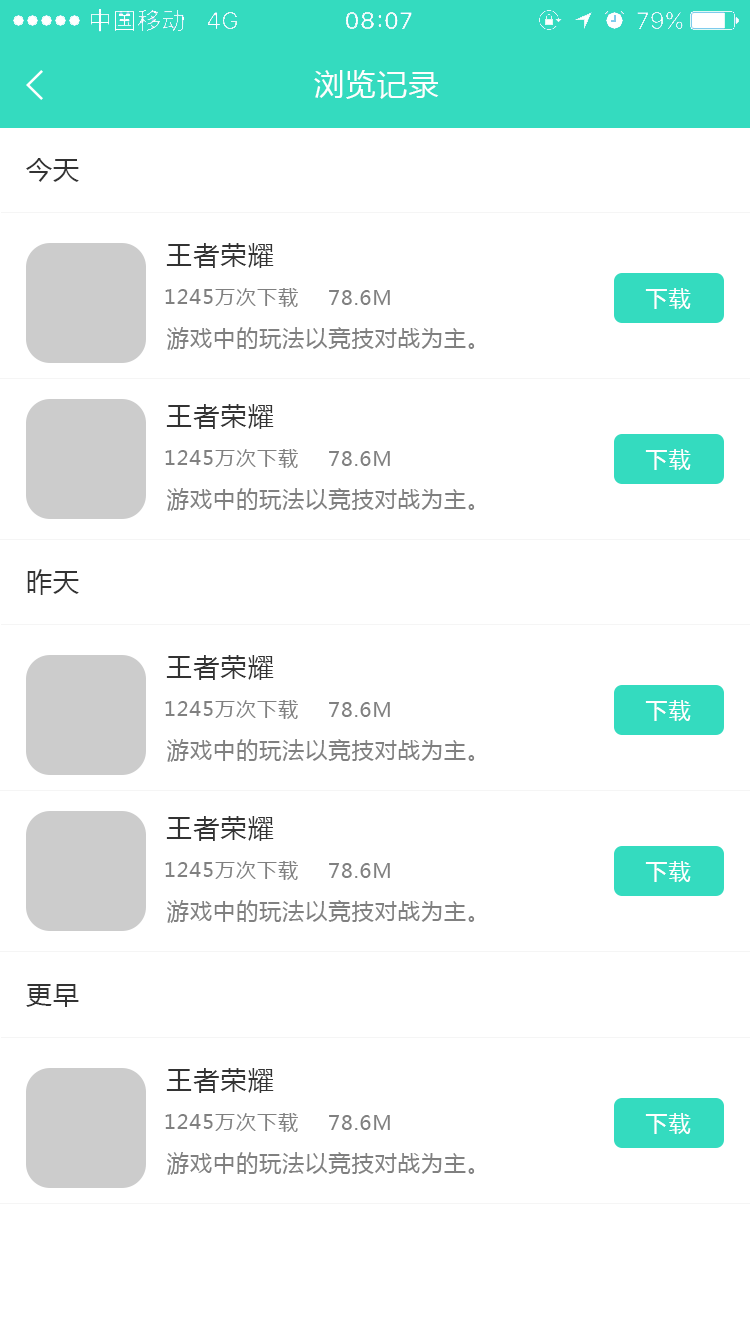
<style>
.page{position:relative;width:750px;height:1334px;background:#ffffff}
.page>*{position:absolute;margin:0}
.t1{font:30px "MicrosoftYaHei";letter-spacing:0.05em;color:#fefefe}
.t2{font:26px "MicrosoftYaHei";letter-spacing:0.05em;color:#333333}
.t3{font:20px "MicrosoftYaHei";letter-spacing:0.05em;color:#808080}
.t4{font:22px "MicrosoftYaHei";letter-spacing:0.05em;color:#ffffff}
.t5{font:22px "MicrosoftYaHei";letter-spacing:0.05em;color:#808080}
</style>
<div class="page">
<p class="t1" style="left:314px;top:70px;width:125px;height:29px">浏览记录</p>
<p class="t2" style="left:26px;top:158px;width:53px;height:24px">今天</p>
<p class="t2" style="left:166px;top:243px;width:108px;height:25px">王者荣耀</p>
<p class="t3" style="left:165px;top:288px;width:133px;height:19px">1245万次下载</p>
<p class="t3" style="left:329px;top:290px;width:61px;height:15px">78.6M</p>
<p class="t4" style="left:645px;top:288px;width:46px;height:21px">下载</p>
<p class="t5" style="left:167px;top:327px;width:308px;height:23px">游戏中的玩法以竞技对战为主。</p>
<p class="t2" style="left:166px;top:404px;width:108px;height:25px">王者荣耀</p>
<p class="t3" style="left:165px;top:449px;width:133px;height:19px">1245万次下载</p>
<p class="t4" style="left:645px;top:449px;width:46px;height:21px">下载</p>
<p class="t3" style="left:329px;top:451px;width:61px;height:15px">78.6M</p>
<p class="t5" style="left:167px;top:488px;width:308px;height:23px">游戏中的玩法以竞技对战为主。</p>
<p class="t2" style="left:27px;top:569px;width:52px;height:26px">昨天</p>
<p class="t2" style="left:166px;top:655px;width:108px;height:25px">王者荣耀</p>
<p class="t3" style="left:165px;top:700px;width:133px;height:19px">1245万次下载</p>
<p class="t3" style="left:329px;top:702px;width:61px;height:15px">78.6M</p>
<p class="t4" style="left:645px;top:700px;width:46px;height:21px">下载</p>
<p class="t5" style="left:167px;top:739px;width:308px;height:23px">游戏中的玩法以竞技对战为主。</p>
<p class="t2" style="left:166px;top:816px;width:108px;height:25px">王者荣耀</p>
<p class="t3" style="left:165px;top:861px;width:133px;height:19px">1245万次下载</p>
<p class="t3" style="left:329px;top:863px;width:61px;height:15px">78.6M</p>
<p class="t4" style="left:645px;top:861px;width:46px;height:21px">下载</p>
<p class="t5" style="left:167px;top:900px;width:308px;height:23px">游戏中的玩法以竞技对战为主。</p>
<p class="t2" style="left:26px;top:984px;width:53px;height:23px">更早</p>
<p class="t2" style="left:166px;top:1068px;width:108px;height:25px">王者荣耀</p>
<p class="t3" style="left:165px;top:1113px;width:133px;height:19px">1245万次下载</p>
<p class="t3" style="left:329px;top:1115px;width:61px;height:15px">78.6M</p>
<p class="t4" style="left:645px;top:1113px;width:46px;height:21px">下载</p>
<p class="t5" style="left:167px;top:1152px;width:308px;height:23px">游戏中的玩法以竞技对战为主。</p>
</div>
